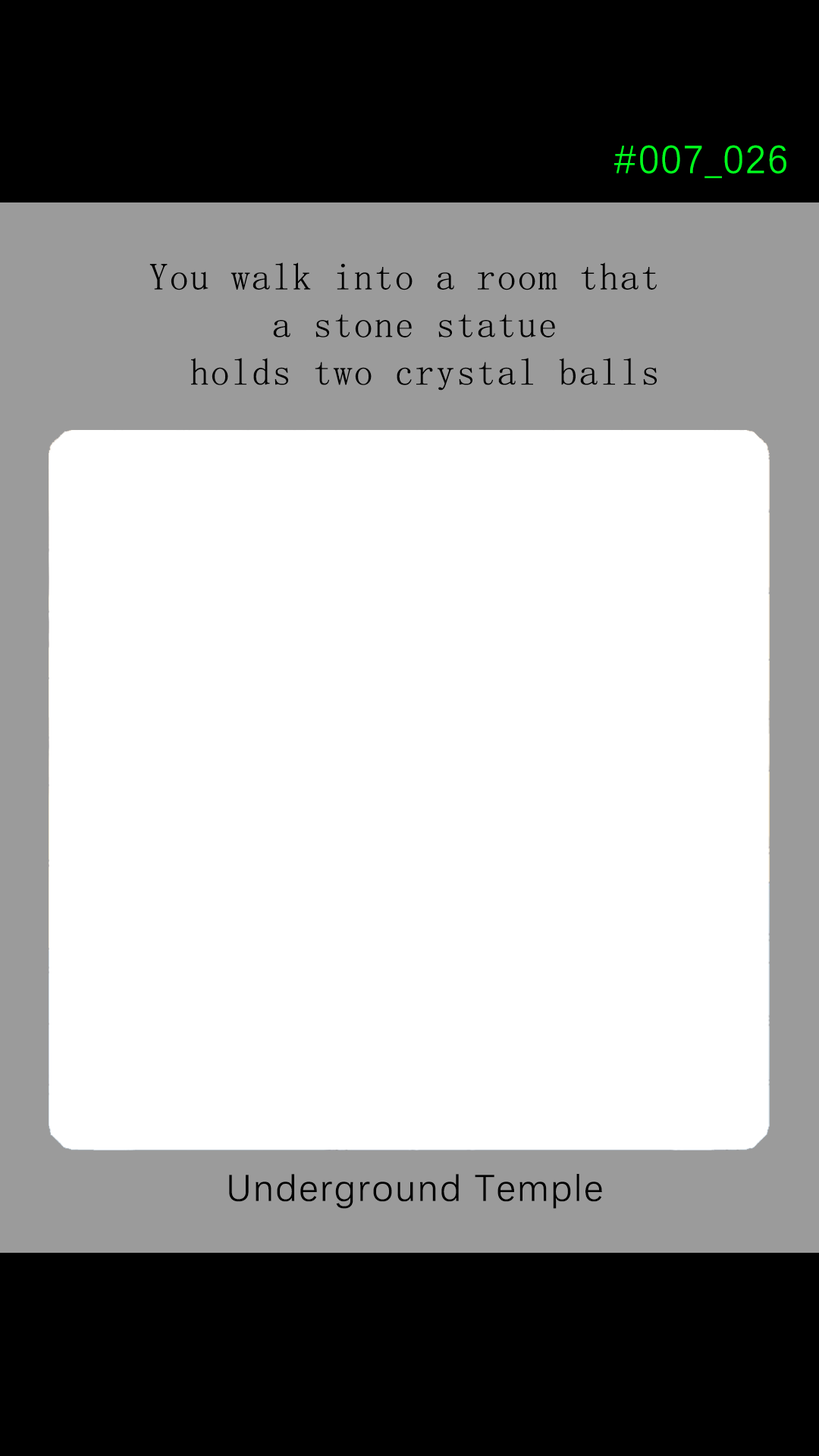
<style>
.page{position:relative;width:819px;height:1456px;background:#ffffff}
.page>*{position:absolute;margin:0}
.t1{font:39.2px "DengXian-Regular";letter-spacing:0.04em;color:#00ff1e}
.t2{font:37.9px/47.6px "SimSun";letter-spacing:0.04em;color:#000000}
.t3{font:37.9px "DengXian-Regular";letter-spacing:0.04em;color:#000000}
</style>
<div class="page">
<p class="t1" style="left:614px;top:145px;width:172px;height:33px">#007_026</p>
<p class="t2" style="left:149px;top:262px;width:508px;height:129px;text-align:center">You walk into a room that <br>a stone statue<br> holds two crystal balls</p>
<p class="t3" style="left:229px;top:1174px;width:373px;height:35px">Underground Temple</p>
</div>
